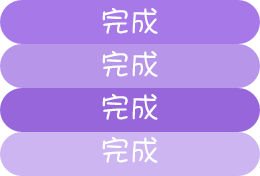
<style>
.page{position:relative;width:260px;height:176px;background:#a779e8}
.page>*{position:absolute;margin:0}
.t1{font:30px "DFShaoNvW5";color:#ffffff}
</style>
<div class="page">
<p class="t1" style="left:102px;top:8px;width:56px;height:26px">完成</p>
<p class="t1" style="left:102px;top:51px;width:56px;height:26px">完成</p>
<p class="t1" style="left:102px;top:94px;width:56px;height:26px">完成</p>
<p class="t1" style="left:102px;top:137px;width:56px;height:26px">完成</p>
</div>
